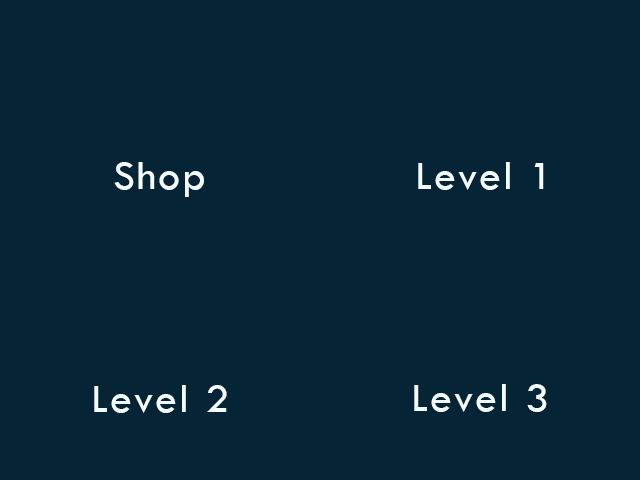
<style>
.page{position:relative;width:640px;height:480px;background:#052536}
.page>*{position:absolute;margin:0}
.t1{font:41.7px "TwCenMT-Regular";letter-spacing:0.05em;color:#f4fdff;scale:1.05 1}
</style>
<div class="page">
<p class="t1" style="left:114px;top:162px;width:90px;height:35px">Shop</p>
<p class="t1" style="left:418px;top:162px;width:126px;height:28px">Level 1</p>
<p class="t1" style="left:94px;top:385px;width:133px;height:28px">Level 2</p>
<p class="t1" style="left:414px;top:384px;width:133px;height:28px">Level 3</p>
</div>
